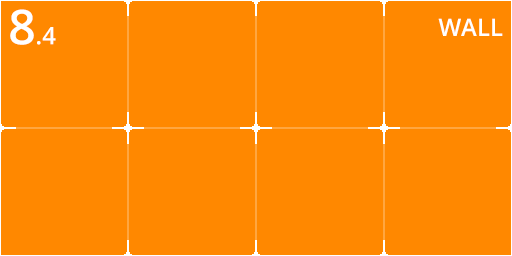
<style>
.page{position:relative;width:512px;height:256px;background:#ff8800}
.page>*{position:absolute;margin:0}
.t1{font:24px "OpenSans-Semibold";color:#ffffff}
.t2{font:48px "OpenSans-Semibold";color:#ffffff}
</style>
<div class="page">
<p class="t1" style="left:10px;top:9px;width:46px;height:36px"><span class="t2">8</span>.4</p>
<p class="t1" style="left:438px;top:18px;width:65px;height:18px">WALL</p>
</div>
